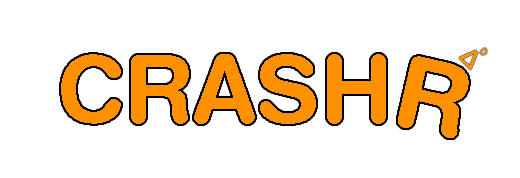
<style>
.page{position:relative;width:520px;height:178px;background:#ffffff}
.page>*{position:absolute;margin:0}
.t1{font:93.8px "HelveticaRoundedLTStd-Bd";color:#ff9000}
.t2{font:25px "HelveticaRoundedLTStd-Bd";color:#ff9000}
.t3{font:20.8px "MyriadPro-Regular";color:#ff9000}
.t4{font:100px "HelveticaRoundedLTStd-Bd";color:#ff9000}
</style>
<div class="page">
<p class="t1" style="left:61px;top:54px;width:325px;height:70px">CRASH</p>
<p class="t2" style="left:459px;top:50px;width:19px;height:20px;rotate:43deg">∆</p>
<p class="t3" style="left:480px;top:48px;width:7px;height:7px;rotate:43deg">⁰</p>
<p class="t4" style="left:398px;top:56px;width:71px;height:82px;rotate:13deg">R</p>
</div>
